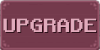
<style>
.page{position:relative;width:100px;height:50px;background:#743a4c}
.page>*{position:absolute;margin:0}
.t1{font:18.4px "RetroGaming";letter-spacing:-0.04em;color:#e1abbc}
</style>
<div class="page">
<p class="t1" style="left:3px;top:18px;width:93px;height:14px">UPGRADE</p>
</div>
